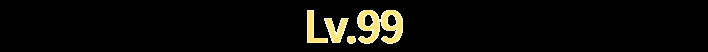
<style>
.page{position:relative;width:708px;height:52px;background:#000000}
.page>*{position:absolute;margin:0}
.t1{font:42px "WebPSD-18463539-0-Regular";color:#ffe57b;font-weight:bold}
</style>
<div class="page">
<p class="t1" style="left:0px;top:0px;width:708px;height:52px">Lv.99</p>
</div>
